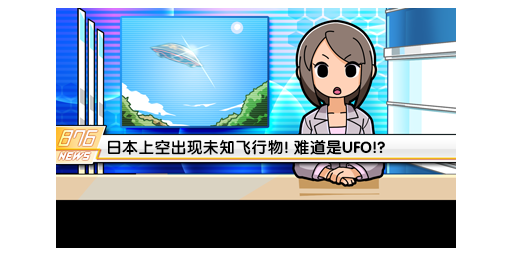
<style>
.page{position:relative;width:512px;height:256px;background:#ffffff}
.page>*{position:absolute;margin:0}
.t1{font:16px "FZY4K--GBK1-0";letter-spacing:0.01em;color:#000000}
</style>
<div class="page">
<p class="t1" style="left:108px;top:139px;width:277px;height:16px">日本上空出现未知飞行物! 难道是UFO!?</p>
</div>
